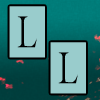
<style>
.page{position:relative;width:100px;height:100px;background:#99cccc}
.page>*{position:absolute;margin:0}
.t1{font:50.6px/36px "TheRoots";letter-spacing:0.21em;color:#99cccc;scale:0.69 1}
</style>
<div class="page">
<p class="t1" style="left:9px;top:6px;width:77px;height:88px;text-align:center">L<br>  L</p>
</div>
